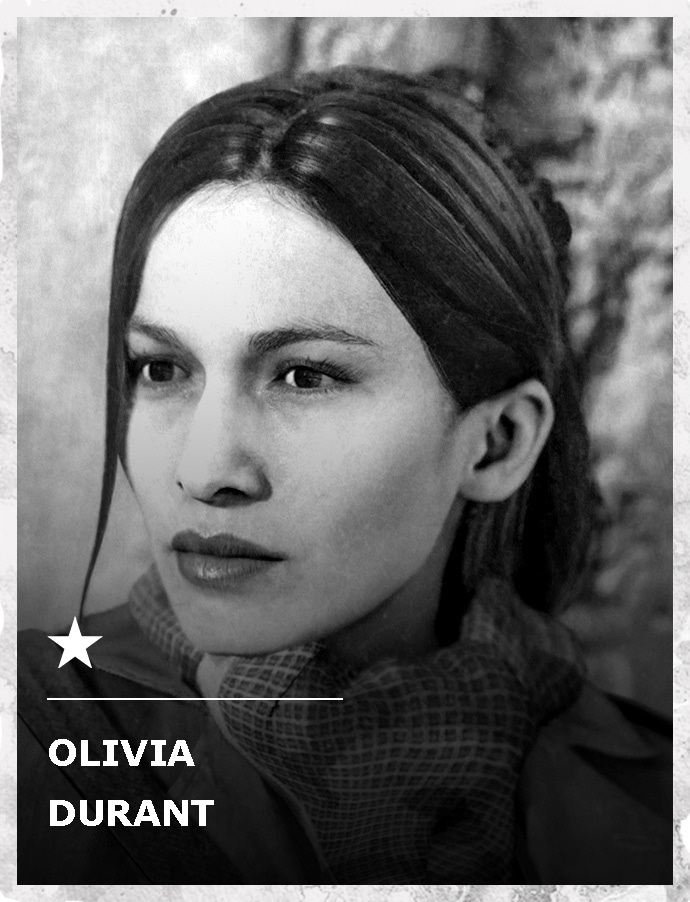
<style>
.page{position:relative;width:690px;height:902px}
.page>*{position:absolute;margin:0}
.t1{font:36px "Verdana-Bold";letter-spacing:-0.01em;color:#ffffff}
</style>
<div class="page">
<p class="t1" style="left:49px;top:739px;width:146px;height:27px">OLIVIA</p>
<p class="t1" style="left:50px;top:800px;width:164px;height:26px">DURANT</p>
</div>
